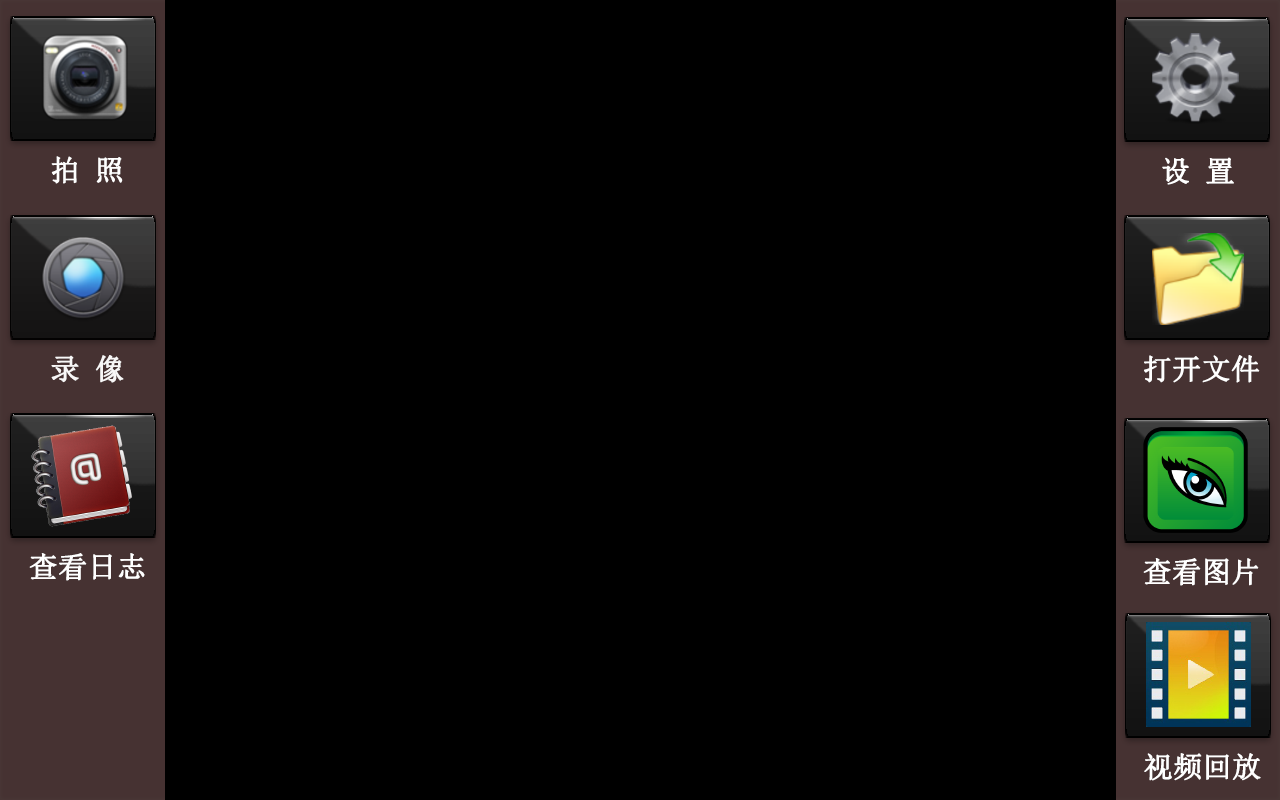
<style>
.page{position:relative;width:1280px;height:800px;background:#000000}
.page>*{position:absolute;margin:0}
.t1{font:28.8px "SimSun";color:#ffffff;font-weight:bold}
.t2{font:28.7px "SimSun";color:#ffffff;font-weight:bold}
</style>
<div class="page">
<p class="t1" style="left:51px;top:156px;width:72px;height:28px">拍 照</p>
<p class="t1" style="left:1162px;top:157px;width:72px;height:28px">设 置</p>
<p class="t2" style="left:51px;top:355px;width:73px;height:28px">录 像</p>
<p class="t2" style="left:1144px;top:355px;width:116px;height:28px">打开文件</p>
<p class="t2" style="left:29px;top:553px;width:116px;height:28px">查看日志</p>
<p class="t2" style="left:1143px;top:558px;width:116px;height:28px">查看图片</p>
<p class="t2" style="left:1144px;top:753px;width:117px;height:28px">视频回放</p>
</div>
